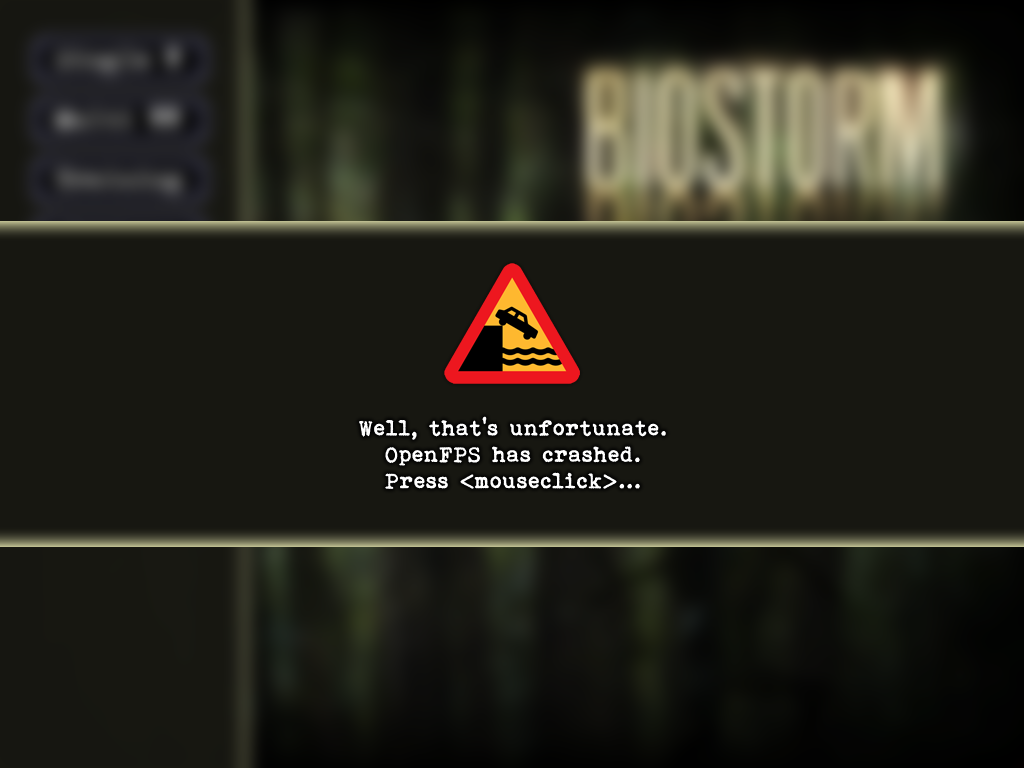
<style>
.page{position:relative;width:1024px;height:768px;background:#171711}
.page>*{position:absolute;margin:0}
.t1{font:22px "Bohemian-typewriter";color:#ffffff}
</style>
<div class="page">
<p class="t1" style="left:359px;top:416px;width:307px;height:73px;text-align:center">Well, that’s unfortunate.<br>OpenFPS has crashed.<br>Press &lt;mouseclick&gt;...</p>
</div>
